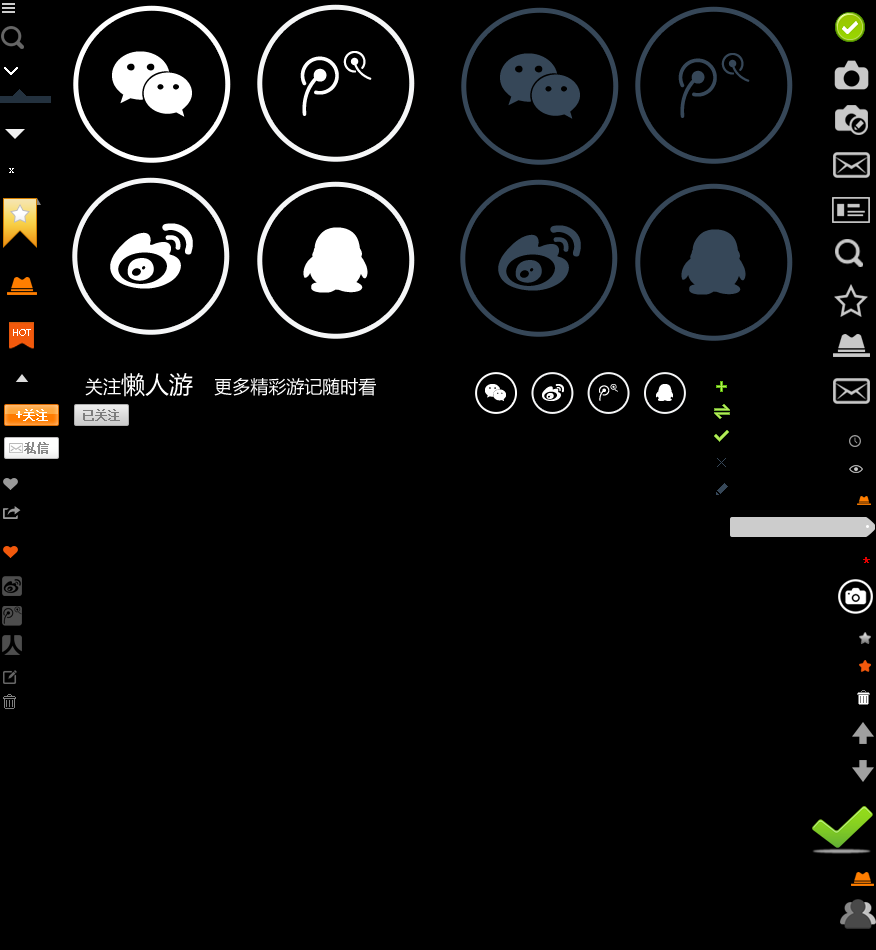
<style>
.page{position:relative;width:876px;height:950px;background:#000000}
.page>*{position:absolute;margin:0}
.t1{font:9px "MicrosoftYaHei";color:#ffffff}
.t2{font:12px "SimSun";color:#ffffff;font-weight:bold}
.t3{font:12px "SimSun";color:#7d7d7d;font-weight:bold}
.t4{font:12px "SimSun";color:#898989;font-weight:bold}
.t5{font:14px "MicrosoftYaHei";color:#e20000;font-weight:bold}
</style>
<div class="page">
<p class="t1" style="left:13px;top:329px;width:18px;height:7px">HOT</p>
<p class="t2" style="left:16px;top:409px;width:32px;height:12px">+关注</p>
<p class="t3" style="left:83px;top:409px;width:37px;height:12px">已关注</p>
<p class="t4" style="left:24px;top:442px;width:25px;height:12px">私信</p>
<p class="t5" style="left:863px;top:557px;width:7px;height:6px">*</p>
</div>
